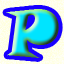
<style>
.page{position:relative;width:64px;height:64px}
.page>*{position:absolute;margin:0}
.t1{font:65px "SnapITC-Regular"}
</style>
<div class="page">
<p class="t1" style="left:6px;top:9px;width:53px;height:49px">P</p>
</div>
